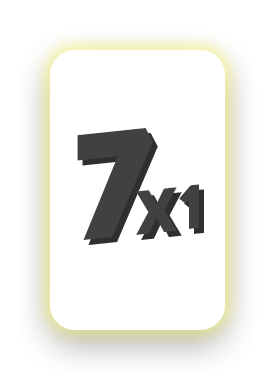
<style>
.page{position:relative;width:275px;height:380px;background:#ffffff}
.page>*{position:absolute;margin:0}
.t1{font:61.5px "UniSansHeavyCAPS";letter-spacing:0.045em;color:#414141}
.t2{font:149px "UniSansHeavyCAPS";letter-spacing:-0.11em;color:#414141}
</style>
<div class="page">
<p class="t1" style="left:77px;top:127px;width:122px;height:114px;rotate:-6deg"><span class="t2">7</span>x1</p>
</div>
